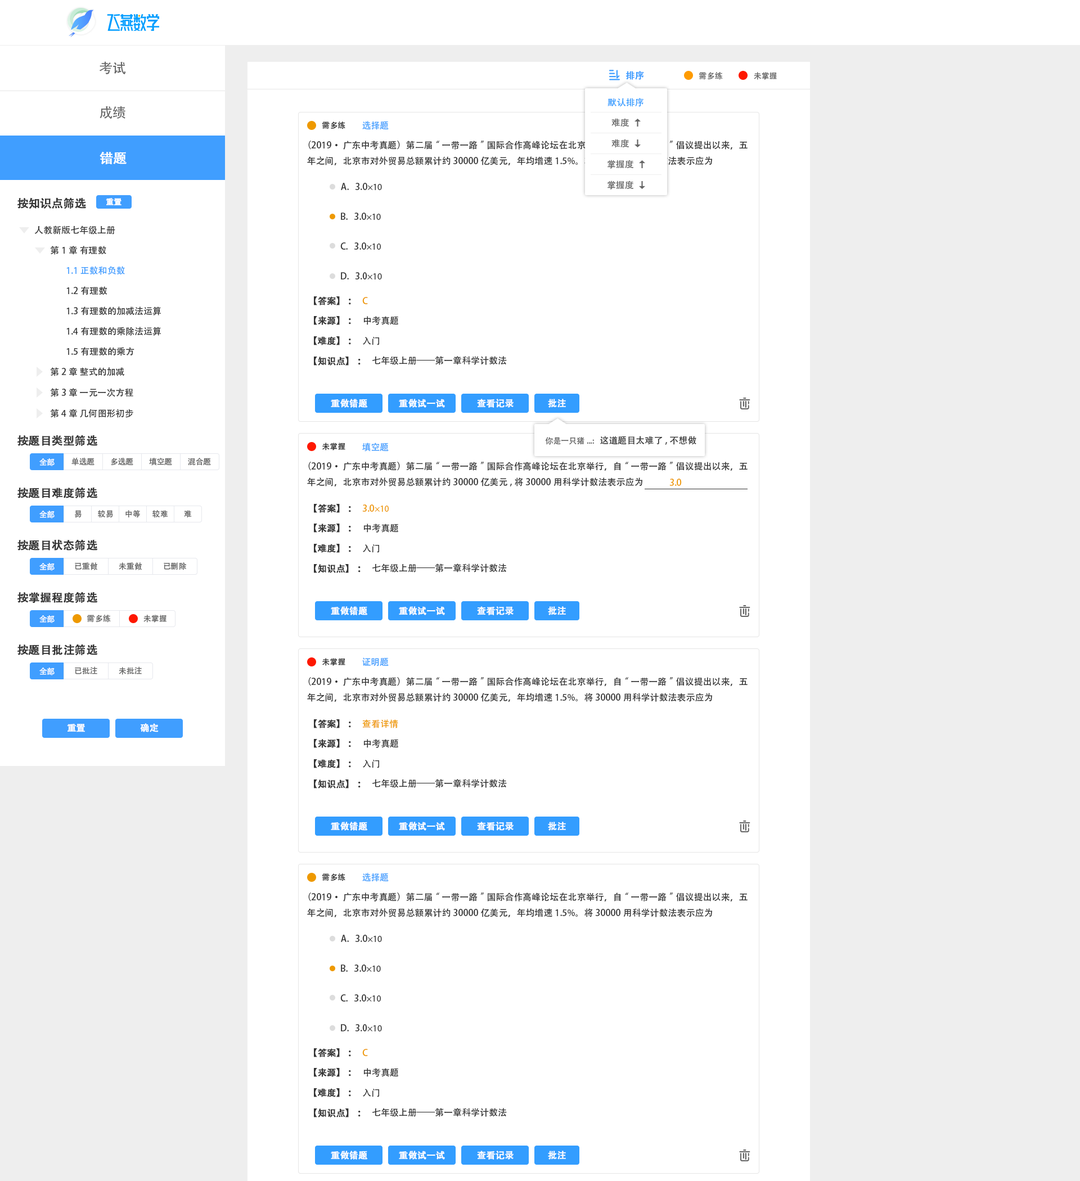
<style>
.page{position:relative;width:1080px;height:1181px;background:#ffffff}
.page>*{position:absolute;margin:0}
.t1{font:13.5px "AdobeHeitiStd-Regular";color:#666666}
.t2{font:9px "AdobeHeitiStd-Regular";color:#409eff;font-weight:bold}
.t3{font:7.9px "AdobeHeitiStd-Regular";color:#666666}
.t4{font:9px "AdobeHeitiStd-Regular";color:#339dff}
.t5{font:7.9px "AdobeHeitiStd-Regular";color:#333333}
.t6{font:9px "AdobeHeitiStd-Regular";color:#409eff}
.t7{font:9px "AdobeHeitiStd-Regular";color:#666666}
.t8{font:9px "AdobeHeitiStd-Regular";color:#333333}
.t9{font:13.5px "AdobeHeitiStd-Regular";color:#ffffff;font-weight:bold}
.t10{font:9px "MyriadPro-Regular";color:#333333}
.t11{font:11.2px "AdobeHeitiStd-Regular";color:#333333;font-weight:bold}
.t12{font:7.9px "AdobeHeitiStd-Regular";color:#ffffff;font-weight:bold}
.t13{font:9px "AdobeHeitiStd-Regular";color:#333333;font-weight:bold}
.t14{font:9px "AdobeHeitiStd-Regular";color:#ee9900}
.t15{font:9px "AdobeHeitiStd-Regular";color:#ffffff;font-weight:bold}
.t16{font:7.9px "AdobeHeitiStd-Regular";color:#ffffff}
.t17{font:9px "MyriadPro-Regular";color:#ee9900}
</style>
<div class="page">
<p class="t1" style="left:99px;top:61px;width:27px;height:13px">考试</p>
<p class="t2" style="left:626px;top:71px;width:18px;height:9px">排序</p>
<p class="t3" style="left:699px;top:72px;width:24px;height:8px">需多练</p>
<p class="t3" style="left:754px;top:72px;width:23px;height:8px">未掌握</p>
<p class="t4" style="left:608px;top:98px;width:36px;height:9px">默认排序</p>
<p class="t1" style="left:100px;top:106px;width:25px;height:13px">成绩</p>
<p class="t5" style="left:322px;top:122px;width:23px;height:7px">需多练</p>
<p class="t6" style="left:362px;top:121px;width:27px;height:9px">选择题</p>
<p class="t7" style="left:611px;top:118px;width:18px;height:9px">难度</p>
<p class="t8" style="left:307px;top:141px;width:441px;height:24px">（2019·广东中考真题）第二届“一带一路”国际合作高峰论坛在北京举行，自“一带一路”倡议提出以来，五年之间，北京市对外贸易总额累计约30000亿美元，年均增速1.5%。将30000用科学计数法表示应为</p>
<p class="t7" style="left:611px;top:139px;width:18px;height:9px">难度</p>
<p class="t9" style="left:100px;top:152px;width:27px;height:12px">错题</p>
<p class="t7" style="left:608px;top:160px;width:26px;height:9px">掌握度</p>
<p class="t8" style="left:341px;top:183px;width:41px;height:7px">A.   3.0<span class="t10">×10</span></p>
<p class="t7" style="left:608px;top:181px;width:26px;height:9px">掌握度</p>
<p class="t11" style="left:17px;top:197px;width:69px;height:12px">按知识点筛选</p>
<p class="t12" style="left:106px;top:198px;width:16px;height:7px">重置</p>
<p class="t8" style="left:341px;top:213px;width:40px;height:7px">B.   3.0<span class="t10">×10</span></p>
<p class="t8" style="left:34px;top:226px;width:81px;height:9px">人教新版七年级上册</p>
<p class="t8" style="left:50px;top:246px;width:56px;height:9px">第1章 有理数</p>
<p class="t8" style="left:340px;top:242px;width:41px;height:8px">C.   3.0<span class="t10">×10</span></p>
<p class="t6" style="left:66px;top:266px;width:59px;height:9px">1.1 正数和负数</p>
<p class="t8" style="left:341px;top:272px;width:41px;height:8px">D.   3.0<span class="t10">×10</span></p>
<p class="t8" style="left:66px;top:286px;width:41px;height:9px">1.2有理数</p>
<p class="t13" style="left:314px;top:296px;width:37px;height:9px">【答案】：</p>
<p class="t14" style="left:362px;top:297px;width:6px;height:7px">C</p>
<p class="t8" style="left:66px;top:307px;width:95px;height:9px">1.3有理数的加减法运算</p>
<p class="t13" style="left:314px;top:316px;width:37px;height:9px">【来源】：</p>
<p class="t8" style="left:363px;top:316px;width:35px;height:9px">中考真题</p>
<p class="t8" style="left:66px;top:327px;width:95px;height:9px">1.4有理数的乘除法运算</p>
<p class="t13" style="left:314px;top:336px;width:37px;height:9px">【难度】：</p>
<p class="t8" style="left:363px;top:337px;width:16px;height:8px">入门</p>
<p class="t8" style="left:66px;top:347px;width:68px;height:9px">1.5有理数的乘方</p>
<p class="t13" style="left:314px;top:357px;width:47px;height:9px">【知识点】：</p>
<p class="t8" style="left:372px;top:356px;width:135px;height:9px">七年级上册——第一章科学计数法</p>
<p class="t8" style="left:50px;top:367px;width:74px;height:9px">第2章 整式的加减</p>
<p class="t8" style="left:50px;top:388px;width:83px;height:9px">第3章 一元一次方程</p>
<p class="t15" style="left:331px;top:399px;width:37px;height:9px">重做错题</p>
<p class="t15" style="left:399px;top:399px;width:46px;height:9px">重做试一试</p>
<p class="t15" style="left:477px;top:399px;width:37px;height:9px">查看记录</p>
<p class="t15" style="left:548px;top:399px;width:18px;height:9px">批注</p>
<p class="t8" style="left:50px;top:409px;width:83px;height:9px">第4章 几何图形初步</p>
<p class="t11" style="left:17px;top:435px;width:81px;height:12px">按题目类型筛选</p>
<p class="t3" style="left:545px;top:437px;width:49px;height:8px">你是一只猪...:</p>
<p class="t8" style="left:600px;top:436px;width:96px;height:9px">这道题目太难了,不想做</p>
<p class="t5" style="left:322px;top:443px;width:23px;height:8px">未掌握</p>
<p class="t6" style="left:362px;top:443px;width:27px;height:9px">填空题</p>
<p class="t16" style="left:39px;top:458px;width:16px;height:8px">全部</p>
<p class="t3" style="left:71px;top:457px;width:23px;height:9px">单选题</p>
<p class="t3" style="left:111px;top:457px;width:22px;height:9px">多选题</p>
<p class="t3" style="left:149px;top:458px;width:23px;height:8px">填空题</p>
<p class="t3" style="left:188px;top:458px;width:23px;height:8px">混合题</p>
<p class="t8" style="left:307px;top:462px;width:441px;height:25px">（2019·广东中考真题）第二届“一带一路”国际合作高峰论坛在北京举行，自“一带一路”倡议提出以来，五年之间，北京市对外贸易总额累计约30000亿美元,将30000用科学计数法表示应为</p>
<p class="t14" style="left:669px;top:479px;width:13px;height:7px">3.0</p>
<p class="t11" style="left:17px;top:487px;width:81px;height:12px">按题目难度筛选</p>
<p class="t13" style="left:314px;top:504px;width:37px;height:9px">【答案】：</p>
<p class="t14" style="left:362px;top:505px;width:27px;height:7px">3.0<span class="t17">×10</span></p>
<p class="t16" style="left:39px;top:511px;width:16px;height:8px">全部</p>
<p class="t3" style="left:74px;top:510px;width:8px;height:8px">易</p>
<p class="t3" style="left:98px;top:510px;width:15px;height:8px">较易</p>
<p class="t3" style="left:125px;top:510px;width:15px;height:8px">中等</p>
<p class="t3" style="left:152px;top:510px;width:16px;height:8px">较难</p>
<p class="t3" style="left:184px;top:510px;width:8px;height:8px">难</p>
<p class="t13" style="left:314px;top:524px;width:37px;height:9px">【来源】：</p>
<p class="t8" style="left:363px;top:524px;width:35px;height:9px">中考真题</p>
<p class="t11" style="left:17px;top:539px;width:81px;height:12px">按题目状态筛选</p>
<p class="t13" style="left:314px;top:544px;width:37px;height:9px">【难度】：</p>
<p class="t8" style="left:363px;top:544px;width:16px;height:9px">入门</p>
<p class="t16" style="left:39px;top:563px;width:16px;height:8px">全部</p>
<p class="t3" style="left:75px;top:562px;width:22px;height:8px">已重做</p>
<p class="t3" style="left:119px;top:562px;width:23px;height:8px">未重做</p>
<p class="t3" style="left:164px;top:562px;width:23px;height:8px">已删除</p>
<p class="t13" style="left:314px;top:564px;width:47px;height:9px">【知识点】：</p>
<p class="t8" style="left:372px;top:564px;width:135px;height:9px">七年级上册——第一章科学计数法</p>
<p class="t11" style="left:17px;top:592px;width:81px;height:12px">按掌握程度筛选</p>
<p class="t16" style="left:39px;top:615px;width:16px;height:8px">全部</p>
<p class="t3" style="left:87px;top:615px;width:24px;height:8px">需多练</p>
<p class="t3" style="left:143px;top:615px;width:23px;height:8px">未掌握</p>
<p class="t15" style="left:331px;top:606px;width:37px;height:9px">重做错题</p>
<p class="t15" style="left:399px;top:606px;width:46px;height:9px">重做试一试</p>
<p class="t15" style="left:477px;top:606px;width:37px;height:9px">查看记录</p>
<p class="t15" style="left:548px;top:606px;width:18px;height:9px">批注</p>
<p class="t11" style="left:17px;top:644px;width:81px;height:12px">按题目批注筛选</p>
<p class="t5" style="left:322px;top:658px;width:23px;height:8px">未掌握</p>
<p class="t6" style="left:362px;top:658px;width:27px;height:9px">证明题</p>
<p class="t16" style="left:39px;top:668px;width:16px;height:8px">全部</p>
<p class="t3" style="left:75px;top:667px;width:22px;height:7px">已批注</p>
<p class="t3" style="left:119px;top:667px;width:23px;height:8px">未批注</p>
<p class="t8" style="left:307px;top:677px;width:441px;height:25px">（2019·广东中考真题）第二届“一带一路”国际合作高峰论坛在北京举行，自“一带一路”倡议提出以来，五年之间，北京市对外贸易总额累计约30000亿美元，年均增速1.5%。将30000用科学计数法表示应为</p>
<p class="t15" style="left:67px;top:724px;width:18px;height:8px">重置</p>
<p class="t15" style="left:140px;top:723px;width:19px;height:9px">确定</p>
<p class="t13" style="left:314px;top:719px;width:37px;height:9px">【答案】：</p>
<p class="t14" style="left:362px;top:719px;width:36px;height:9px">查看详情</p>
<p class="t13" style="left:314px;top:739px;width:37px;height:9px">【来源】：</p>
<p class="t8" style="left:363px;top:739px;width:35px;height:9px">中考真题</p>
<p class="t13" style="left:314px;top:759px;width:37px;height:9px">【难度】：</p>
<p class="t8" style="left:363px;top:760px;width:16px;height:8px">入门</p>
<p class="t13" style="left:314px;top:780px;width:47px;height:9px">【知识点】：</p>
<p class="t8" style="left:372px;top:779px;width:135px;height:9px">七年级上册——第一章科学计数法</p>
<p class="t15" style="left:331px;top:822px;width:37px;height:9px">重做错题</p>
<p class="t15" style="left:399px;top:822px;width:46px;height:9px">重做试一试</p>
<p class="t15" style="left:477px;top:822px;width:37px;height:9px">查看记录</p>
<p class="t15" style="left:548px;top:822px;width:18px;height:9px">批注</p>
<p class="t5" style="left:322px;top:874px;width:23px;height:7px">需多练</p>
<p class="t6" style="left:362px;top:873px;width:27px;height:9px">选择题</p>
<p class="t8" style="left:307px;top:893px;width:441px;height:24px">（2019·广东中考真题）第二届“一带一路”国际合作高峰论坛在北京举行，自“一带一路”倡议提出以来，五年之间，北京市对外贸易总额累计约30000亿美元，年均增速1.5%。将30000用科学计数法表示应为</p>
<p class="t8" style="left:341px;top:935px;width:41px;height:7px">A.   3.0<span class="t10">×10</span></p>
<p class="t8" style="left:341px;top:965px;width:40px;height:7px">B.   3.0<span class="t10">×10</span></p>
<p class="t8" style="left:340px;top:994px;width:41px;height:8px">C.   3.0<span class="t10">×10</span></p>
<p class="t8" style="left:341px;top:1024px;width:41px;height:8px">D.   3.0<span class="t10">×10</span></p>
<p class="t13" style="left:314px;top:1048px;width:37px;height:10px">【答案】：</p>
<p class="t14" style="left:362px;top:1049px;width:6px;height:7px">C</p>
<p class="t13" style="left:314px;top:1068px;width:37px;height:9px">【来源】：</p>
<p class="t8" style="left:363px;top:1068px;width:35px;height:9px">中考真题</p>
<p class="t13" style="left:314px;top:1088px;width:37px;height:9px">【难度】：</p>
<p class="t8" style="left:363px;top:1089px;width:16px;height:8px">入门</p>
<p class="t13" style="left:314px;top:1109px;width:47px;height:9px">【知识点】：</p>
<p class="t8" style="left:372px;top:1108px;width:135px;height:9px">七年级上册——第一章科学计数法</p>
<p class="t15" style="left:331px;top:1151px;width:37px;height:9px">重做错题</p>
<p class="t15" style="left:399px;top:1151px;width:46px;height:9px">重做试一试</p>
<p class="t15" style="left:477px;top:1151px;width:37px;height:9px">查看记录</p>
<p class="t15" style="left:548px;top:1151px;width:18px;height:9px">批注</p>
</div>
